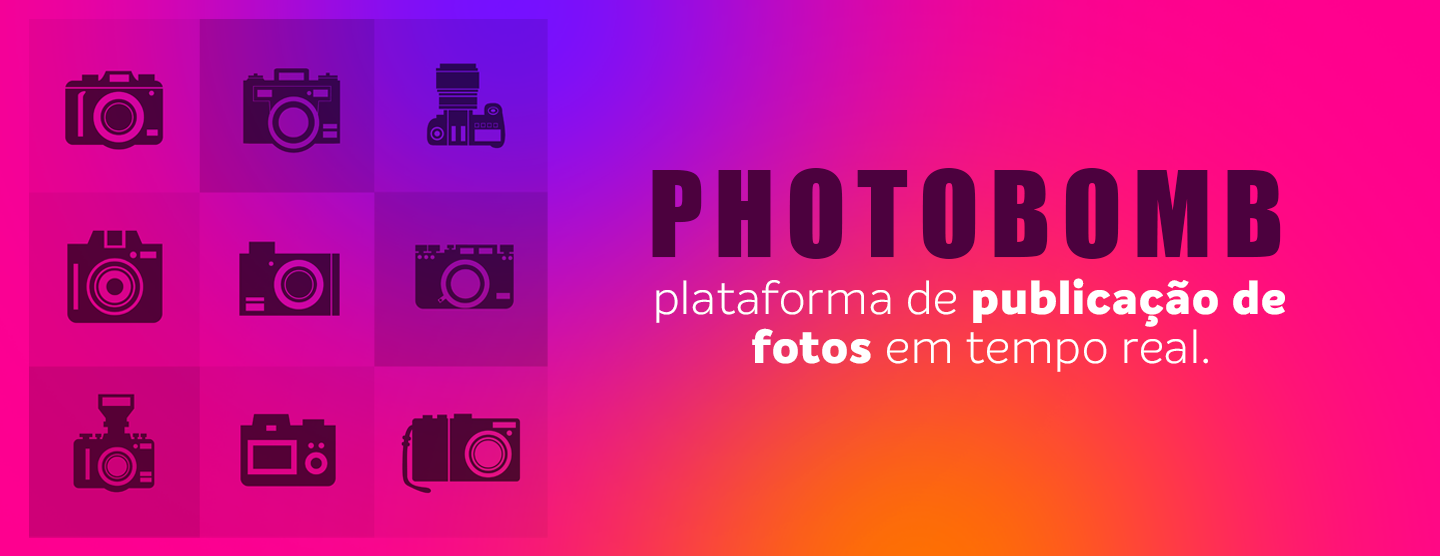
<style>
.page{position:relative;width:1440px;height:556px}
.page>*{position:absolute;margin:0}
.t1{font:110px "Impact";letter-spacing:0.1em;color:#4c013e;text-transform:uppercase}
.t2{font:47px/49.1px "Intelo-ExtraBold";letter-spacing:0.025em;color:#ffffff}
.t3{font:47px/49.1px "Intelo-Light";letter-spacing:0.025em;color:#ffffff}
</style>
<div class="page">
<p class="t1" style="left:652px;top:168px;width:629px;height:91px">photobomb</p>
<p class="t2" style="left:656px;top:278px;width:629px;height:94px;text-align:center"><span class="t3">plataforma de </span>publicação de <br> fotos<span class="t3"> em tempo real.</span></p>
</div>
